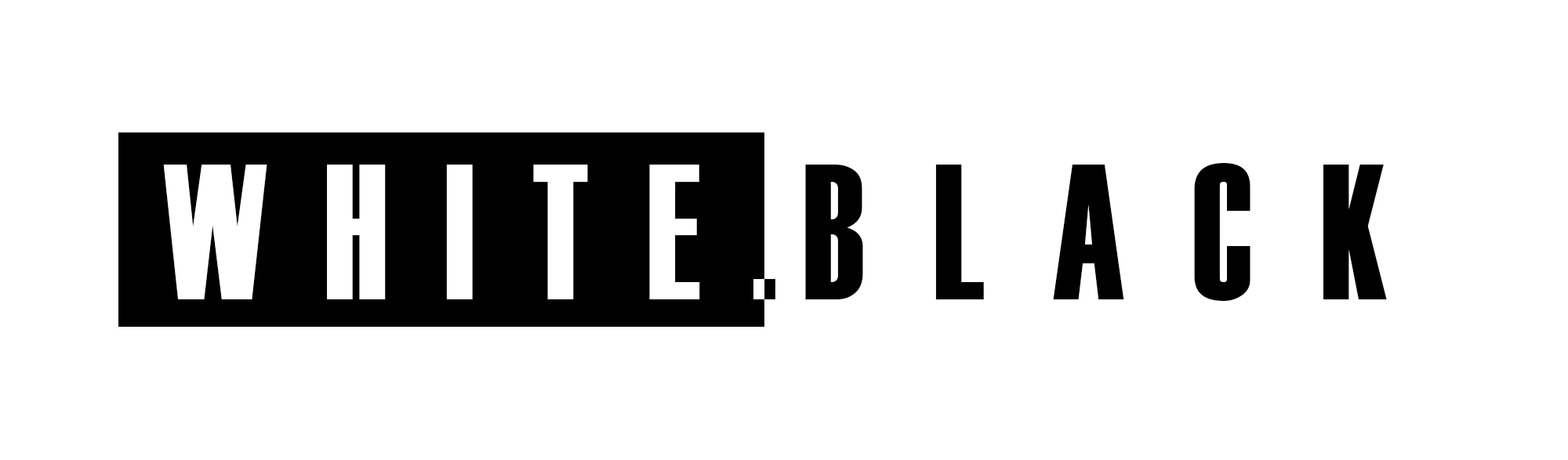
<style>
.page{position:relative;width:1568px;height:460px;background:#ffffff}
.page>*{position:absolute;margin:0}
.t1{font:192.2px "Haettenschweiler";letter-spacing:0.345em;color:#ffffff;text-transform:uppercase;scale:0.86 1}
.t2{font:192.2px "Haettenschweiler";letter-spacing:0.405em;color:#000000;text-transform:uppercase;scale:0.86 1}
</style>
<div class="page">
<p class="t1" style="left:163px;top:165px;width:537px;height:134px">White</p>
<p class="t2" style="left:805px;top:163px;width:582px;height:138px">Black</p>
</div>
